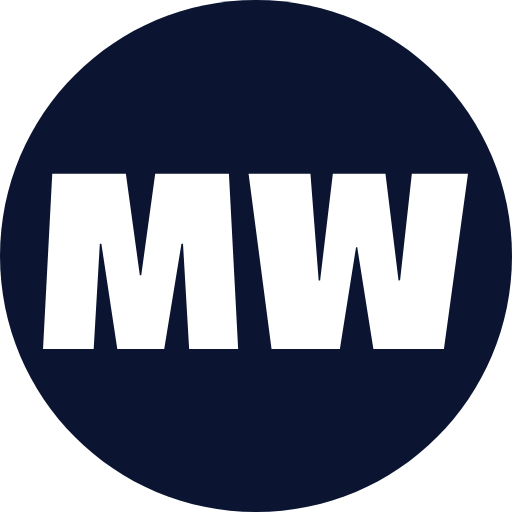
<style>
.page{position:relative;width:512px;height:512px;background:#0b1532}
.page>*{position:absolute;margin:0}
.t1{font:225px "Coda-ExtraBold";color:#ffffff}
</style>
<div class="page">
<p class="t1" style="left:43px;top:173px;width:425px;height:177px">MW</p>
</div>
